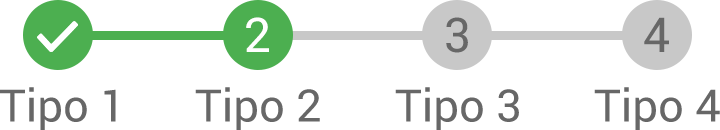
<style>
.page{position:relative;width:720px;height:130px;background:#ffffff}
.page>*{position:absolute;margin:0}
.t1{font:48px "Roboto-Regular";color:#ffffff}
.t2{font:48px "Roboto-Regular";color:#676767}
.t3{font:44.7px "Roboto-Regular";color:#676767}
</style>
<div class="page">
<p class="t1" style="left:246px;top:17px;width:23px;height:35px">2</p>
<p class="t2" style="left:446px;top:17px;width:22px;height:36px">3</p>
<p class="t2" style="left:644px;top:17px;width:25px;height:35px">4</p>
<p class="t3" style="left:0px;top:87px;width:116px;height:44px">Tipo 1</p>
<p class="t3" style="left:195px;top:87px;width:125px;height:44px">Tipo 2</p>
<p class="t3" style="left:395px;top:87px;width:124px;height:44px">Tipo 3</p>
<p class="t3" style="left:594px;top:87px;width:126px;height:44px">Tipo 4</p>
</div>
